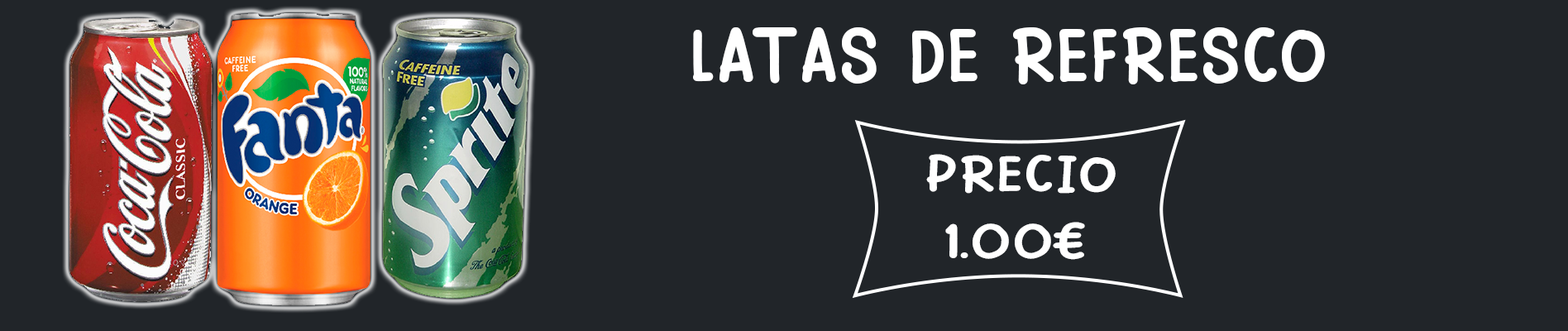
<style>
.page{position:relative;width:1568px;height:331px;background:#212529}
.page>*{position:absolute;margin:0}
.t1{font:82.7px "PinkChicken-Regular";color:#ffffff}
.t2{font:55.1px "PinkChicken-Regular";color:#ffffff;scale:1.23 1}
</style>
<div class="page">
<p class="t1" style="left:693px;top:27px;width:632px;height:57px">LATAS DE REFRESCO</p>
<p class="t2" style="left:926px;top:154px;width:190px;height:106px;text-align:center">PRECIO<br>1.00€</p>
</div>
